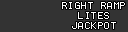
<style>
.page{position:relative;width:128px;height:32px;background:#333333}
.page>*{position:absolute;margin:0}
.t1{font:8px/10px "Terminal";letter-spacing:0.2em;color:#ffffff}
</style>
<div class="page">
<p class="t1" style="left:62px;top:2px;width:63px;height:27px;text-align:center">RIGHT RAMP<br>LITES<br>JACKPOT</p>
</div>
